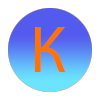
<style>
.page{position:relative;width:100px;height:100px;background:#ffffff}
.page>*{position:absolute;margin:0}
.t1{font:66.7px "MyriadPro-Regular";color:#ff7302}
</style>
<div class="page">
<p class="t1" style="left:35px;top:27px;width:31px;height:45px">К</p>
</div>
